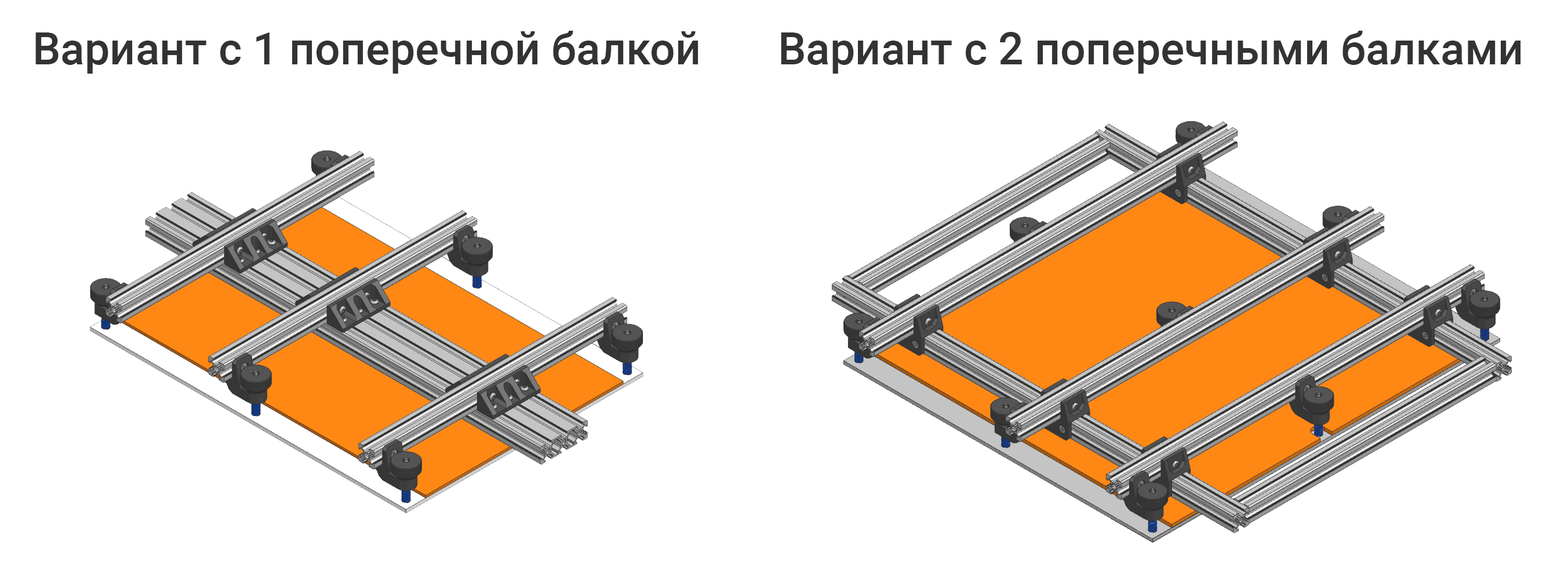
<style>
.page{position:relative;width:1568px;height:575px;background:#ffffff}
.page>*{position:absolute;margin:0}
.t1{font:44.6px "Roboto-Medium";color:#333333}
</style>
<div class="page">
<p class="t1" style="left:35px;top:31px;width:663px;height:43px">Вариант с 1 поперечной балкой</p>
<p class="t1" style="left:781px;top:31px;width:740px;height:43px">Вариант с 2 поперечными балками</p>
</div>
